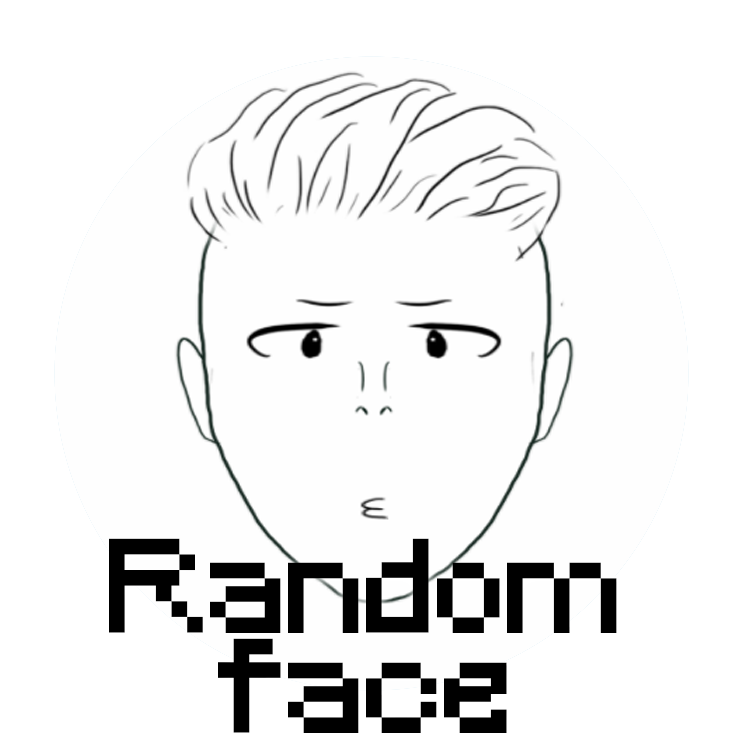
<style>
.page{position:relative;width:750px;height:750px;background:#fefefe}
.page>*{position:absolute;margin:0}
.t1{font:125px/100px "Minecraft";color:#000000}
</style>
<div class="page">
<p class="t1" style="left:109px;top:538px;width:508px;height:195px;text-align:center">Random<br>face</p>
</div>
